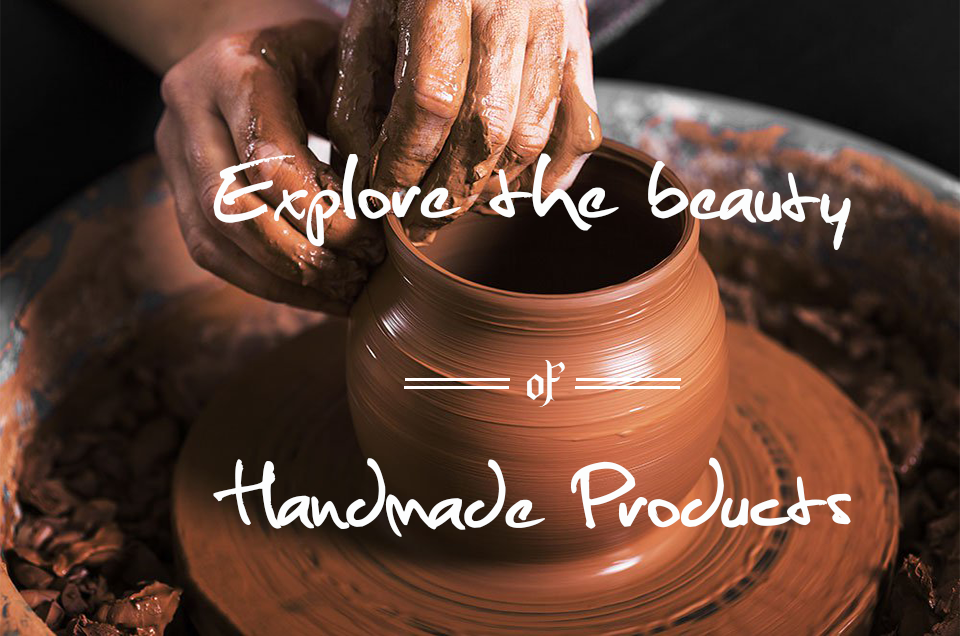
<style>
.page{position:relative;width:960px;height:636px}
.page>*{position:absolute;margin:0}
.t1{font:125px "Christopherhand";color:#fcfdfd}
.t2{font:46.1px "Endor";color:#fcfdfd}
</style>
<div class="page">
<p class="t1" style="left:213px;top:153px;width:638px;height:384px;text-align:right">Explore the beauty<br><br> Handmade Products</p>
<p class="t2" style="left:527px;top:360px;width:38px;height:47px">of</p>
</div>
